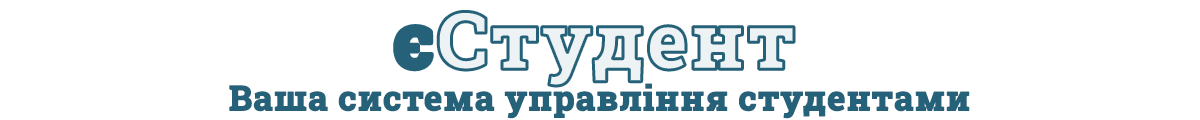
<style>
.page{position:relative;width:1200px;height:120px;background:#ffffff}
.page>*{position:absolute;margin:0}
.t1{font:35px "RobotoSlab-ExtraBold";color:#256279;font-weight:bold}
</style>
<div class="page">
<p class="t1" style="left:229px;top:83px;width:741px;height:36px">Ваша система управління студентами</p>
</div>
